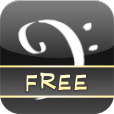
<style>
.page{position:relative;width:114px;height:114px}
.page>*{position:absolute;margin:0}
.t1{font:30px "RedStateBlueStateBB";letter-spacing:0.075em}
</style>
<div class="page">
<p class="t1" style="left:26px;top:72px;width:61px;height:20px">FREE</p>
</div>
